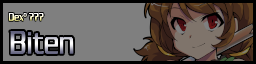
<style>
.page{position:relative;width:256px;height:64px;background:#7f7f7f}
.page>*{position:absolute;margin:0}
.t1{font:12px "ChaneyThinNormal"}
.t2{font:36px "ChaneyThinNormal"}
</style>
<div class="page">
<p class="t1" style="left:8px;top:13px;width:36px;height:8px">Dexº ???</p>
<p class="t2" style="left:10px;top:31px;width:64px;height:23px">Biten</p>
</div>
